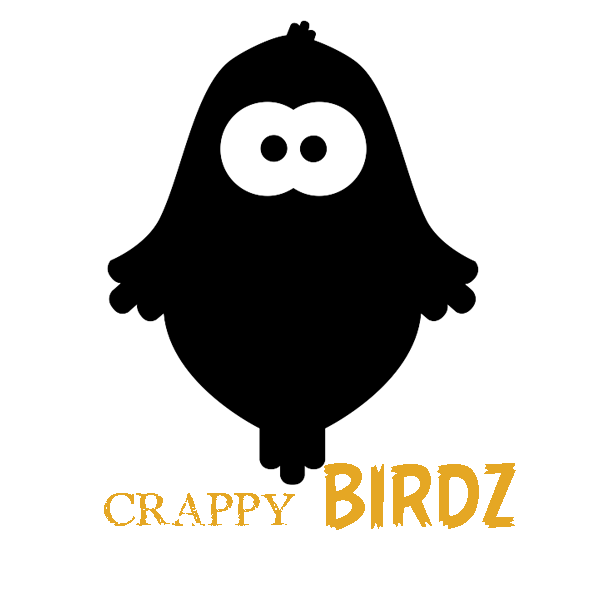
<style>
.page{position:relative;width:600px;height:600px;background:#ffffff}
.page>*{position:absolute;margin:0}
.t1{font:80px "StoneBird";color:#e5a825}
.t2{font:80px "AngryBirds-Regular";color:#e5a825}
</style>
<div class="page">
<p class="t1" style="left:104px;top:463px;width:412px;height:67px">CRAPPY <span class="t2">BIRDZ</span></p>
</div>
